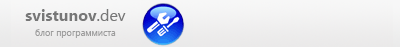
<style>
.page{position:relative;width:400px;height:47px}
.page>*{position:absolute;margin:0}
.t1{font:16px "SegoeUI-Bold";color:#777777}
.t2{font:16px "SegoeUI";color:#777777}
.t3{font:9px "SegoeUI";color:#9b9b9b}
</style>
<div class="page">
<p class="t1" style="left:25px;top:9px;width:101px;height:12px">svistunov<span class="t2">.dev</span></p>
<p class="t3" style="left:35px;top:29px;width:81px;height:9px">блог программиста</p>
</div>
